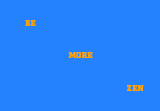
<style>
.page{position:relative;width:160px;height:111px;background:#2582fe}
.page>*{position:absolute;margin:0}
.t1{font:8px "Factoria-Ultra";color:#ffa109}
</style>
<div class="page">
<p class="t1" style="left:25px;top:20px;width:11px;height:6px">BE</p>
<p class="t1" style="left:68px;top:52px;width:25px;height:6px">MORE</p>
<p class="t1" style="left:126px;top:85px;width:18px;height:6px">ZEN</p>
</div>
